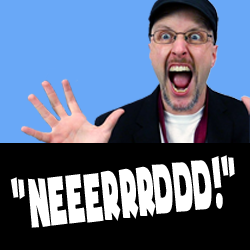
<style>
.page{position:relative;width:250px;height:250px;background:#69a8f7}
.page>*{position:absolute;margin:0}
.t1{font:78.8px "SoupofJustice";color:#ffffff;scale:0.46 1}
</style>
<div class="page">
<p class="t1" style="left:10px;top:155px;width:225px;height:73px;rotate:-6deg">"NeEERRRDDD!"</p>
</div>
